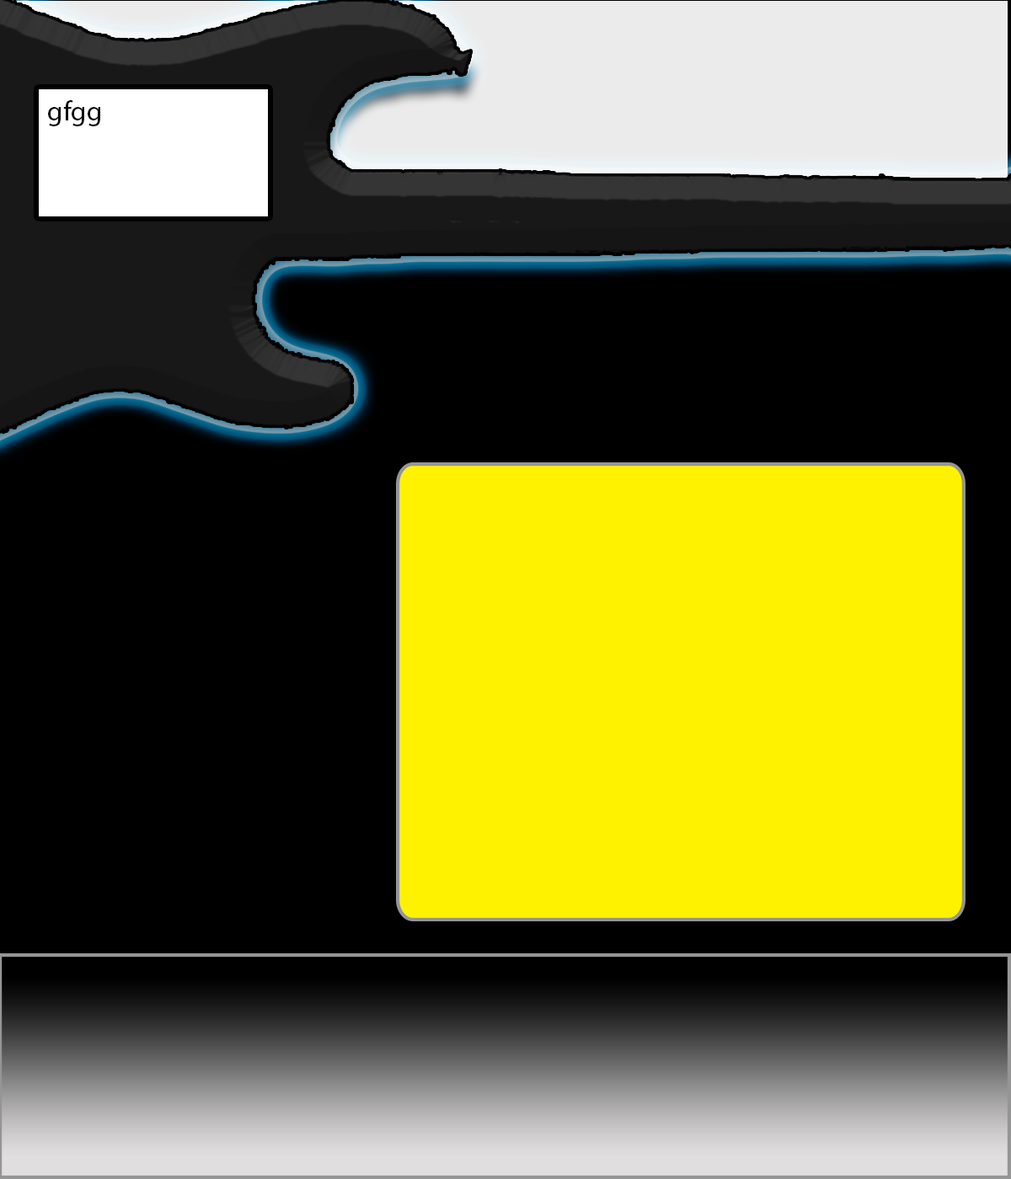
<style>
.page{position:relative;width:1011px;height:1179px;background:#000000}
.page>*{position:absolute;margin:0}
.t1{font:28.1px "MyriadPro-Regular";color:#080808}
</style>
<div class="page">
<p class="t1" style="left:48px;top:100px;width:52px;height:26px">gfgg</p>
</div>
